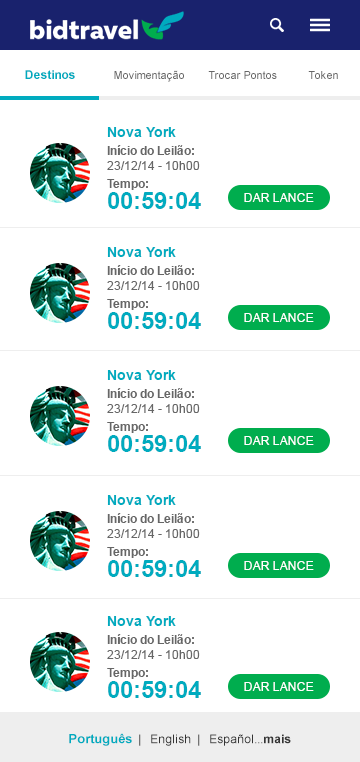
<style>
.page{position:relative;width:360px;height:762px;background:#ffffff}
.page>*{position:absolute;margin:0}
.t1{font:12px "Arial-BoldMT";color:#00abbf}
.t2{font:11px "ArialMT";color:#666666}
.t3{font:12px/18px "Arial-BoldMT";color:#666666}
.t4{font:14px/27px "Arial-BoldMT";color:#00abbf}
.t5{font:12px/15px "ArialMT";color:#666666}
.t6{font:24px/21px "Arial-BoldMT";color:#00abbf}
.t7{font:12px "ArialMT";color:#ffffff;text-transform:uppercase}
.t8{font:12px "ArialMT";color:#333333}
.t9{font:13px "Arial-BoldMT";color:#00abbf}
.t10{font:12px "Arial-BoldMT";color:#333333}
</style>
<div class="page">
<p class="t1" style="left:25px;top:70px;width:50px;height:9px">Destinos</p>
<p class="t2" style="left:114px;top:70px;width:70px;height:12px">Movimentação</p>
<p class="t2" style="left:208px;top:71px;width:69px;height:8px">Trocar Pontos</p>
<p class="t2" style="left:308px;top:71px;width:30px;height:8px">Token</p>
<p class="t3" style="left:107px;top:127px;width:94px;height:82px"><span class="t4">Nova York<br></span>Início do Leilão:<br><span class="t5">23/12/14 - 10h00<br></span>Tempo:<br><span class="t6">00:59:04</span></p>
<p class="t7" style="left:244px;top:193px;width:70px;height:9px">dar lance</p>
<p class="t3" style="left:107px;top:247px;width:94px;height:82px"><span class="t4">Nova York<br></span>Início do Leilão:<br><span class="t5">23/12/14 - 10h00<br></span>Tempo:<br><span class="t6">00:59:04</span></p>
<p class="t7" style="left:244px;top:313px;width:70px;height:9px">dar lance</p>
<p class="t3" style="left:107px;top:370px;width:94px;height:82px"><span class="t4">Nova York<br></span>Início do Leilão:<br><span class="t5">23/12/14 - 10h00<br></span>Tempo:<br><span class="t6">00:59:04</span></p>
<p class="t7" style="left:244px;top:436px;width:70px;height:9px">dar lance</p>
<p class="t3" style="left:107px;top:495px;width:94px;height:82px"><span class="t4">Nova York<br></span>Início do Leilão:<br><span class="t5">23/12/14 - 10h00<br></span>Tempo:<br><span class="t6">00:59:04</span></p>
<p class="t7" style="left:244px;top:561px;width:70px;height:9px">dar lance</p>
<p class="t3" style="left:107px;top:616px;width:94px;height:82px"><span class="t4">Nova York<br></span>Início do Leilão:<br><span class="t5">23/12/14 - 10h00<br></span>Tempo:<br><span class="t6">00:59:04</span></p>
<p class="t7" style="left:244px;top:682px;width:70px;height:9px">dar lance</p>
<p class="t8" style="left:69px;top:733px;width:222px;height:13px"><span class="t9">Português</span>  |   English  |   Español...<span class="t10">mais</span></p>
</div>
